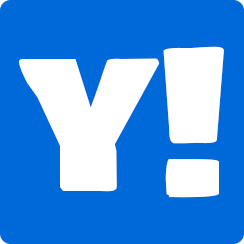
<style>
.page{position:relative;width:244px;height:244px;background:#0069d9}
.page>*{position:absolute;margin:0}
.t1{font:200px "BowlbyOneSC-Regular";color:#ffffff}
</style>
<div class="page">
<p class="t1" style="left:19px;top:46px;width:205px;height:152px">y!</p>
</div>
